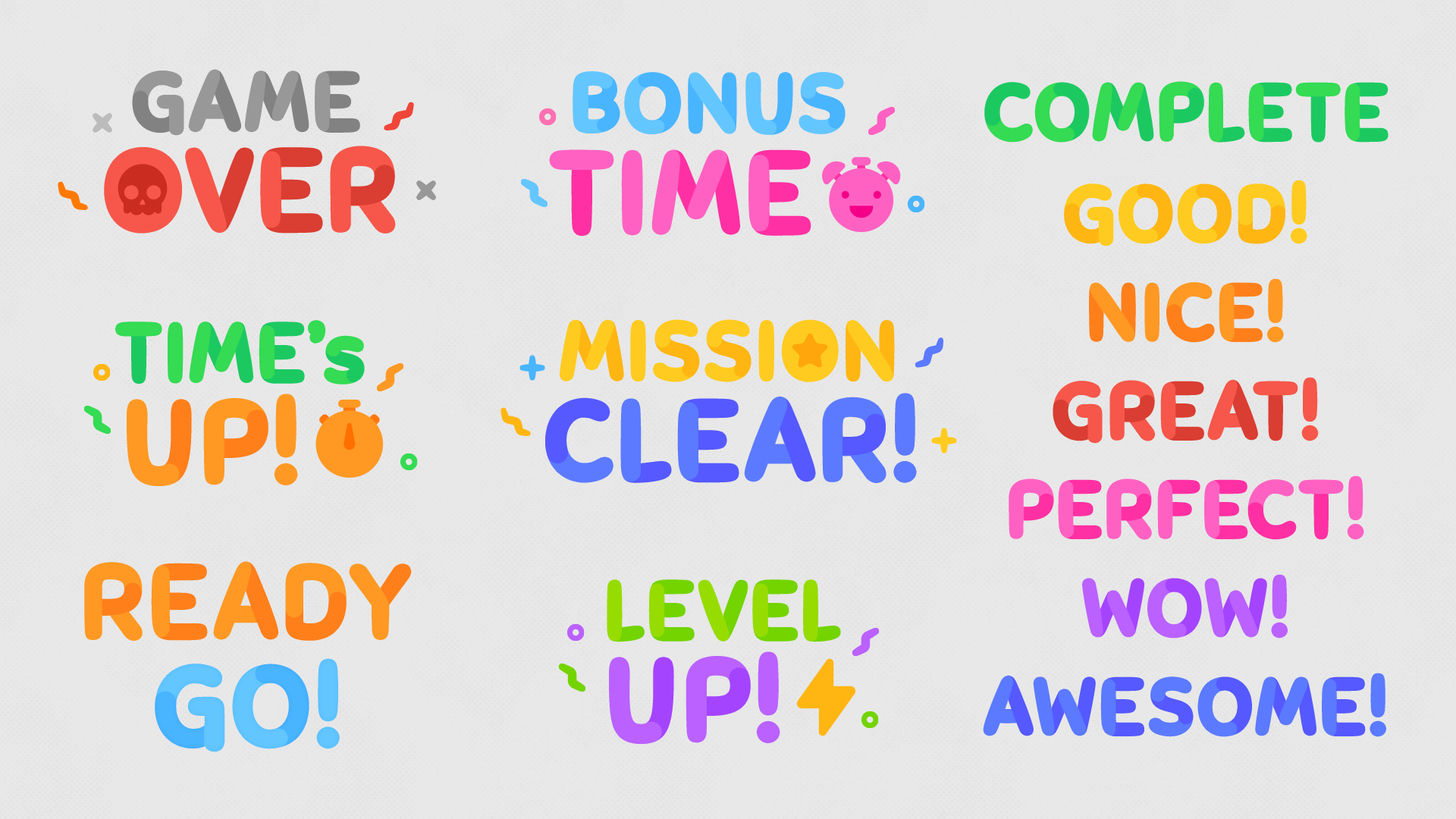
<style>
.page{position:relative;width:1456px;height:819px;background:#e8e8e8}
.page>*{position:absolute;margin:0}
.t1{font:77.4px "Sniglet-Regular";letter-spacing:0.06em;font-weight:bold;scale:1.06 1}
.t2{font:77.4px "Sniglet-Regular";letter-spacing:0.06em;color:#4fb7ff;text-transform:uppercase;font-weight:bold;scale:1.06 1}
.t3{font:74.2px "Sniglet-Regular";letter-spacing:0.06em;text-transform:uppercase;font-weight:bold;scale:1.05 1}
.t4{font:107.7px "Sniglet-Regular";letter-spacing:0.06em;color:#f6574a;text-transform:uppercase;font-weight:bold;scale:1.05 1}
.t5{font:107.7px "Sniglet-Regular";letter-spacing:0.06em;text-transform:uppercase;font-weight:bold;scale:1.05 1}
.t6{font:77.4px "Sniglet-Regular";letter-spacing:0.06em;text-transform:uppercase;font-weight:bold;scale:1.06 1}
.t7{font:77.4px "Sniglet-Regular";letter-spacing:0.06em;color:#ffcb20;text-transform:uppercase;font-weight:bold;scale:1.06 1}
.t8{font:105.4px "Sniglet-Regular";letter-spacing:0.06em;text-transform:uppercase;font-weight:bold;scale:1.05 1}
.t9{font:97.9px "Sniglet-Regular";letter-spacing:0.06em;text-transform:uppercase;font-weight:bold;scale:1.05 1}
.t10{font:105.5px "Sniglet-Regular";letter-spacing:0.06em;color:#64c6ff;text-transform:uppercase;font-weight:bold;scale:1.05 1}
</style>
<div class="page">
<p class="t1" style="left:134px;top:71px;width:224px;height:62px">GAME</p>
<p class="t2" style="left:575px;top:74px;width:268px;height:59px">bonus</p>
<p class="t3" style="left:987px;top:83px;width:399px;height:57px">Complete</p>
<p class="t4" style="left:107px;top:149px;width:286px;height:82px">over</p>
<p class="t5" style="left:552px;top:152px;width:256px;height:81px">time</p>
<p class="t3" style="left:1066px;top:182px;width:239px;height:62px">GOOD!</p>
<p class="t3" style="left:1091px;top:281px;width:191px;height:59px">NICE!</p>
<p class="t6" style="left:118px;top:322px;width:244px;height:60px">Time<span class="t1">’s</span></p>
<p class="t7" style="left:562px;top:322px;width:331px;height:58px">Mission</p>
<p class="t3" style="left:1055px;top:379px;width:261px;height:62px">GREAT!</p>
<p class="t5" style="left:130px;top:397px;width:165px;height:86px">UP!</p>
<p class="t8" style="left:548px;top:396px;width:366px;height:84px">CLEAR!</p>
<p class="t3" style="left:1011px;top:478px;width:351px;height:60px">PERFECT!</p>
<p class="t9" style="left:86px;top:563px;width:323px;height:76px">READY</p>
<p class="t6" style="left:609px;top:582px;width:230px;height:58px">LEVEL</p>
<p class="t3" style="left:1084px;top:576px;width:201px;height:60px">WOW!</p>
<p class="t10" style="left:158px;top:661px;width:179px;height:88px">GO!</p>
<p class="t5" style="left:612px;top:654px;width:165px;height:87px">UP!</p>
<p class="t3" style="left:985px;top:675px;width:399px;height:60px">AWESOME!</p>
</div>
